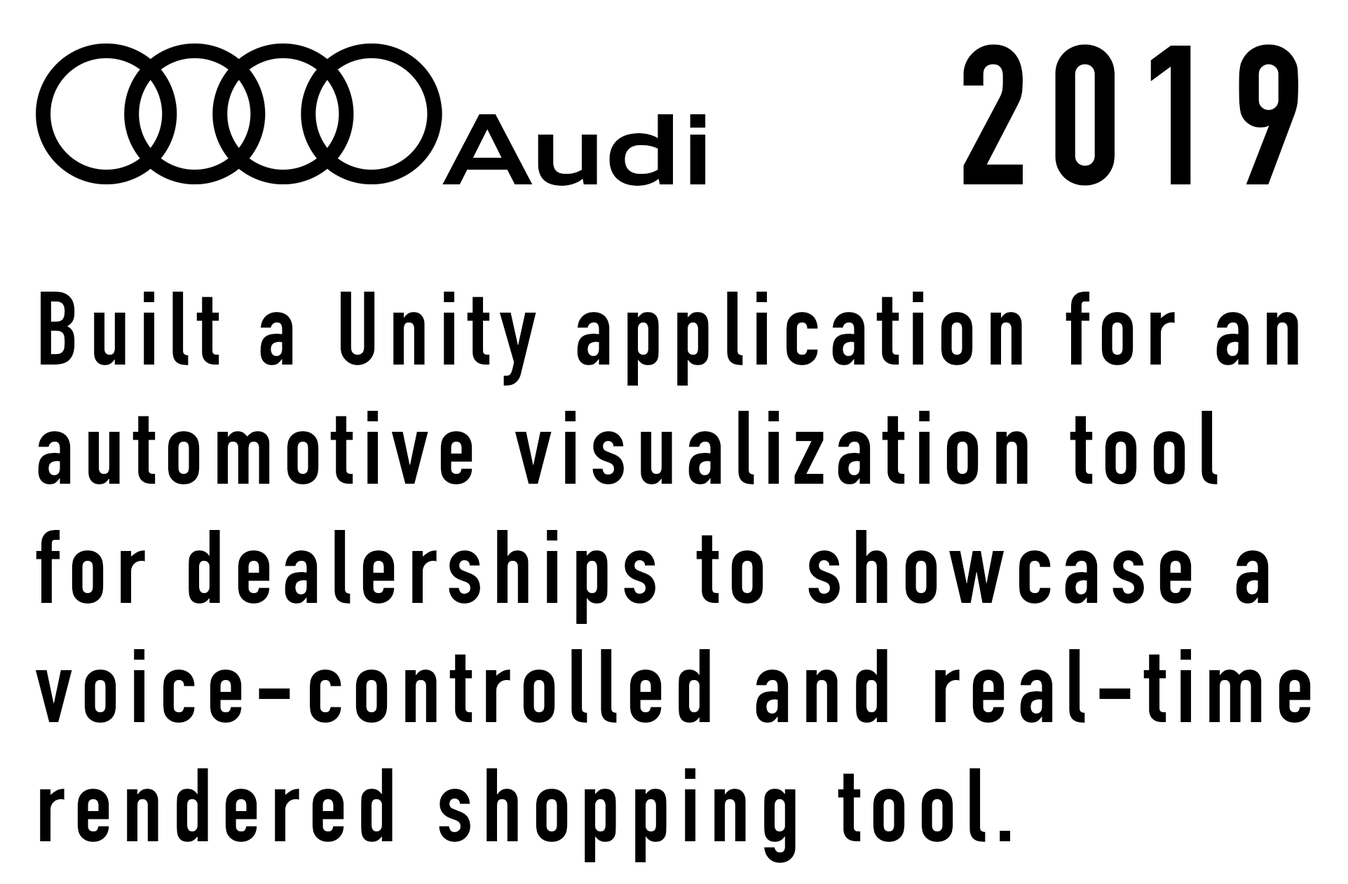
<style>
.page{position:relative;width:1348px;height:884px;background:#ffffff}
.page>*{position:absolute;margin:0}
.t1{font:194.6px "DINCondensed-Bold";letter-spacing:0.1em;color:#000000}
.t2{font:96.6px "AudiType-ExtendedBold";letter-spacing:-0.02em;color:#000000}
.t3{font:102.3px/119.2px "DINCondensed-Bold";letter-spacing:0.1em;color:#000000}
</style>
<div class="page">
<p class="t1" style="left:964px;top:44px;width:335px;height:142px">2019</p>
<p class="t2" style="left:442px;top:114px;width:264px;height:72px">Audi</p>
<p class="t3" style="left:35px;top:292px;width:1276px;height:571px">Built a Unity application for an automotive visualization tool for dealerships to showcase a voice-controlled and real-time rendered shopping tool.</p>
</div>
